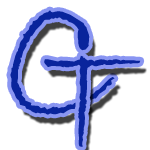
<style>
.page{position:relative;width:150px;height:150px;background:#ffffff}
.page>*{position:absolute;margin:0}
.t1{font:188.9px "BradleyHandITC";letter-spacing:-0.05em;color:#09249c}
.t2{font:168.2px "BradleyHandITC";letter-spacing:-0.05em;color:#09249c;scale:0.89 1}
</style>
<div class="page">
<p class="t1" style="left:10px;top:10px;width:105px;height:105px">C</p>
<p class="t2" style="left:44px;top:55px;width:97px;height:92px">T</p>
</div>
